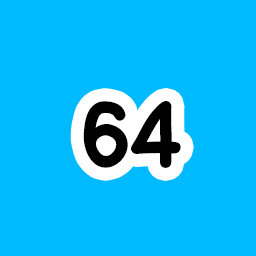
<style>
.page{position:relative;width:256px;height:256px;background:#00baff}
.page>*{position:absolute;margin:0}
.t1{font:90px "ComicHelvetic-Medium";color:#000000}
</style>
<div class="page">
<p class="t1" style="left:83px;top:101px;width:98px;height:67px">64</p>
</div>
